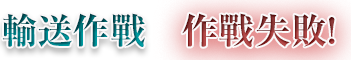
<style>
.page{position:relative;width:351px;height:60px}
.page>*{position:absolute;margin:0}
.t1{font:36px "RyuminPr6N-ExBold";letter-spacing:0.01em}
</style>
<div class="page">
<p class="t1" style="left:2px;top:13px;width:143px;height:34px">輸送作戰</p>
<p class="t1" style="left:182px;top:13px;width:153px;height:34px">作戰失敗!</p>
</div>
